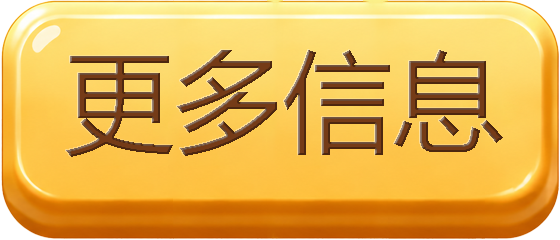
<style>
.page{position:relative;width:560px;height:240px}
.page>*{position:absolute;margin:0}
.t1{font:109.3px "MicrosoftYaHeiUI"}
</style>
<div class="page">
<p class="t1" style="left:66px;top:50px;width:437px;height:107px">更多信息</p>
</div>
